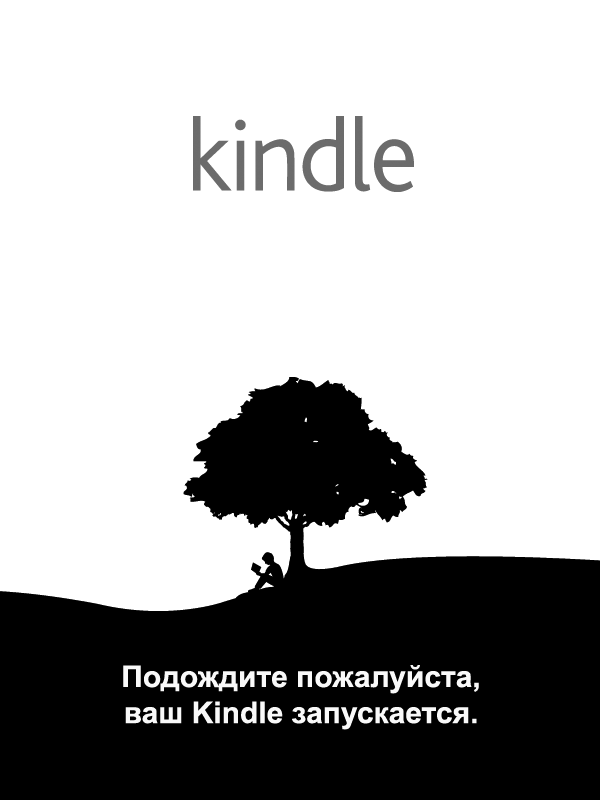
<style>
.page{position:relative;width:600px;height:800px;background:#ffffff}
.page>*{position:absolute;margin:0}
.t1{font:30px "Arial-BoldMT";color:#f9f9f9}
</style>
<div class="page">
<p class="t1" style="left:123px;top:665px;width:356px;height:65px;text-align:center">Подождите пожалуйста,<br>ваш Kindle запускается.</p>
</div>
